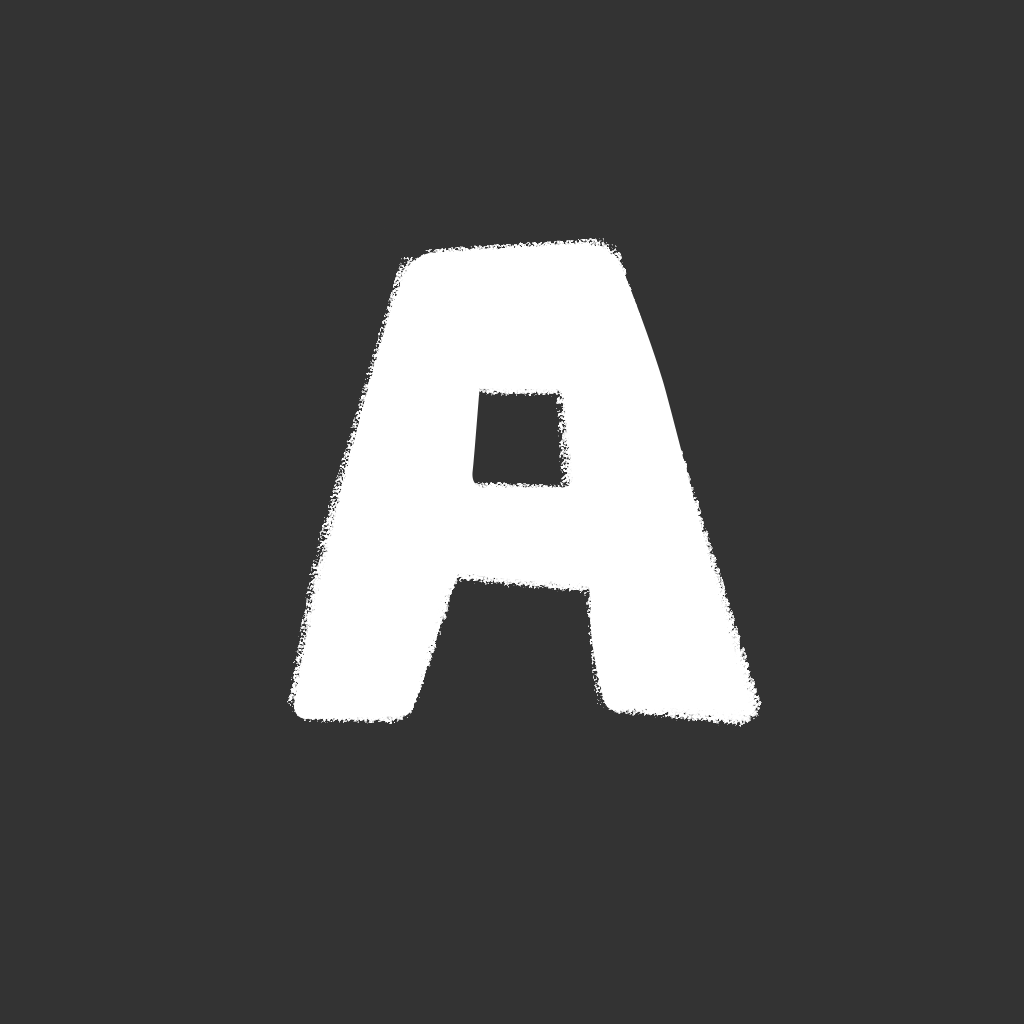
<style>
.page{position:relative;width:1024px;height:1024px;background:#333333}
.page>*{position:absolute;margin:0}
.t1{font:609.3px "EF_jejudoldam";color:#ffffff;text-transform:uppercase}
</style>
<div class="page">
<p class="t1" style="left:294px;top:244px;width:456px;height:475px">a</p>
</div>
